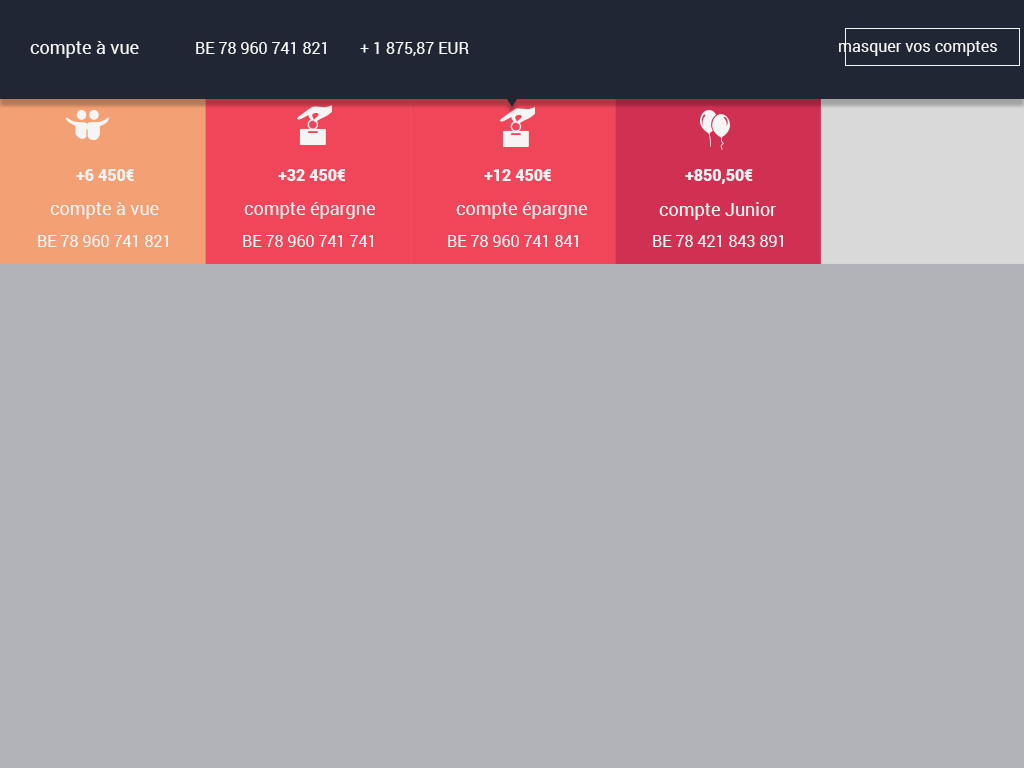
<style>
.page{position:relative;width:1024px;height:768px;background:#b2b3b8}
.page>*{position:absolute;margin:0}
.t1{font:18px "Roboto-Regular";color:#f5f5f5}
.t2{font:16px "Roboto-Regular";color:#f5f5f5}
.t3{font:16px "Roboto-Black";color:#f5f5f5}
</style>
<div class="page">
<p class="t1" style="left:30px;top:41px;width:109px;height:17px">compte à vue</p>
<p class="t2" style="left:839px;top:41px;width:158px;height:15px">masquer vos comptes</p>
<p class="t2" style="left:196px;top:42px;width:130px;height:12px">BE 78 960 741 821</p>
<p class="t2" style="left:360px;top:42px;width:109px;height:14px">+ 1 875,87 EUR</p>
<p class="t3" style="left:76px;top:169px;width:58px;height:12px">+6 450€</p>
<p class="t3" style="left:278px;top:169px;width:67px;height:12px">+32 450€</p>
<p class="t3" style="left:484px;top:169px;width:67px;height:12px">+12 450€</p>
<p class="t3" style="left:685px;top:169px;width:68px;height:15px">+850,50€</p>
<p class="t1" style="left:50px;top:202px;width:109px;height:17px">compte à vue</p>
<p class="t1" style="left:244px;top:202px;width:131px;height:17px">compte épargne</p>
<p class="t1" style="left:456px;top:202px;width:131px;height:17px">compte épargne</p>
<p class="t1" style="left:659px;top:202px;width:117px;height:18px">compte Junior</p>
<p class="t2" style="left:38px;top:235px;width:130px;height:12px">BE 78 960 741 821</p>
<p class="t2" style="left:243px;top:235px;width:130px;height:12px">BE 78 960 741 741</p>
<p class="t2" style="left:448px;top:235px;width:130px;height:12px">BE 78 960 741 841</p>
<p class="t2" style="left:653px;top:235px;width:130px;height:12px">BE 78 421 843 891</p>
</div>
